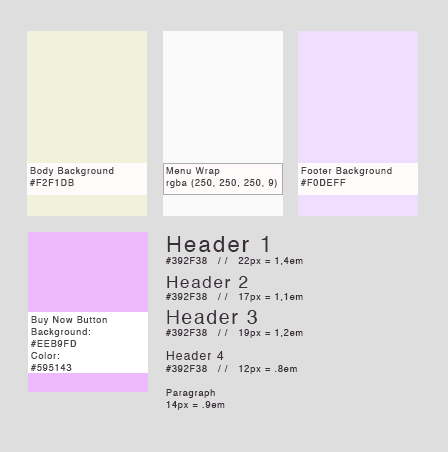
<style>
.page{position:relative;width:448px;height:452px;background:#dfdedf}
.page>*{position:absolute;margin:0}
.t1{font:9px/12px "Helvetica";letter-spacing:0.1em;color:#464546}
.t2{font:9px/12px "Helvetica";letter-spacing:0.1em;color:#392f38}
.t3{font:22px/12px "Helvetica";letter-spacing:0.1em;color:#392f38}
.t4{font:17px/12px "Helvetica";letter-spacing:0.1em;color:#392f38}
.t5{font:19px/12px "Helvetica";letter-spacing:0.1em;color:#392f38}
.t6{font:12px/12px "Helvetica";letter-spacing:0.1em;color:#392f38}
</style>
<div class="page">
<p class="t1" style="left:29px;top:167px;width:85px;height:19px">Body Background<br>#F2F1DB</p>
<p class="t1" style="left:166px;top:167px;width:111px;height:21px">Menu Wrap<br>rgba (250, 250, 250, 9)</p>
<p class="t1" style="left:300px;top:167px;width:92px;height:19px">Footer Background<br>#F0DEFF</p>
<p class="t2" style="left:165px;top:236px;width:138px;height:174px"><span class="t3">Header 1<br></span>#392F38   / /   22px = 1,4em<br><br><span class="t4">Header 2<br></span>#392F38   / /   17px = 1,1em<br><br><span class="t5">Header 3<br></span>#392F38   / /   19px = 1,2em<br><br><span class="t6">Header 4<br></span>#392F38   / /   12px = .8em<br><br>Paragraph<br>14px = .9em</p>
<p class="t1" style="left:30px;top:316px;width:77px;height:55px">Buy Now Button Background:<br>#EEB9FD <br>Color:<br>#595143</p>
</div>
